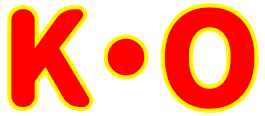
<style>
.page{position:relative;width:265px;height:116px;background:#ffffff}
.page>*{position:absolute;margin:0}
.t1{font:131.5px "Corporate-Logo-Rounded";color:#ff0000}
</style>
<div class="page">
<p class="t1" style="left:11px;top:7px;width:244px;height:102px">K・O</p>
</div>
